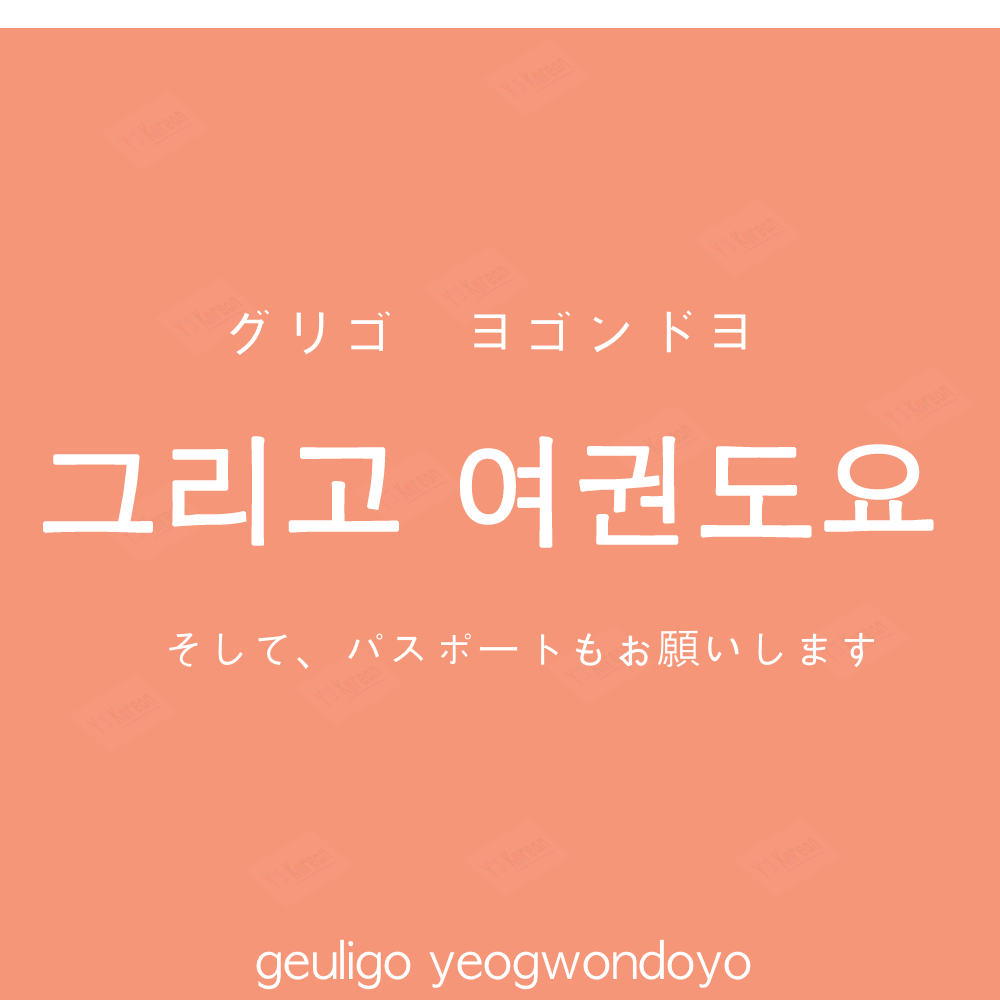
<style>
.page{position:relative;width:1000px;height:1000px;background:#f69679}
.page>*{position:absolute;margin:0}
.t1{font:60px "AppleGothic";color:#ffffff}
.t2{font:120px "AppleGothic";color:#ffffff;font-weight:bold}
.t3{font:45px "AppleGothic";color:#ffffff}
.t4{font:45px "HiraKakuProN-W3";color:#ffffff}
.t5{font:50px "AppleGothic";color:#ffffff}
</style>
<div class="page">
<p class="t1" style="left:230px;top:309px;width:516px;height:46px">グリゴ　ヨゴンドヨ</p>
<p class="t2" style="left:43px;top:436px;width:891px;height:112px">그리고 여권도요</p>
<p class="t3" style="left:169px;top:630px;width:705px;height:39px">そして、パスポ<span class="t4">ー</span>トもお願いします</p>
<p class="t5" style="left:256px;top:939px;width:495px;height:51px">geuligo yeogwondoyo</p>
</div>
